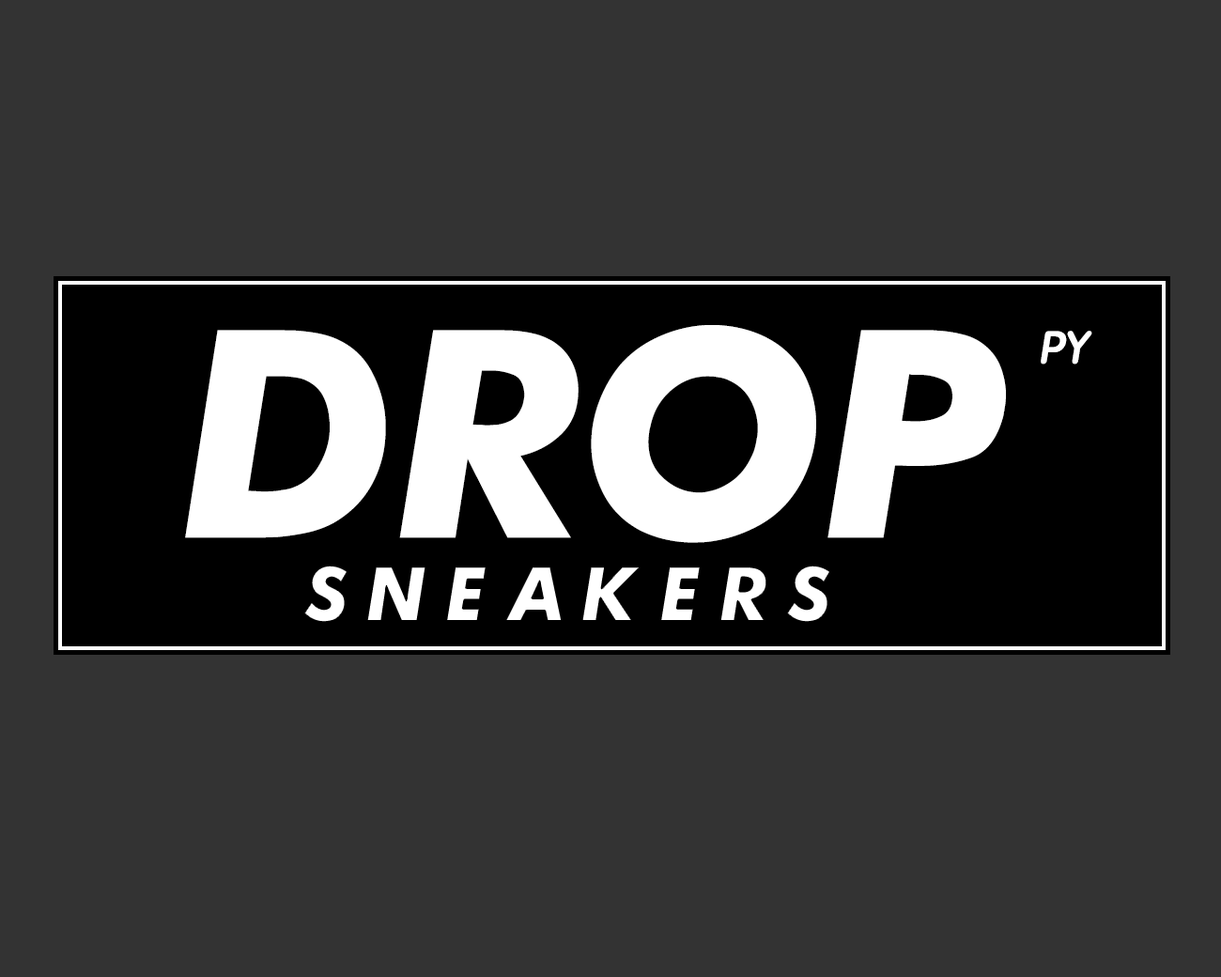
<style>
.page{position:relative;width:1221px;height:977px;background:#333333}
.page>*{position:absolute;margin:0}
.t1{font:323.2px "Futura-Bold-Italic";color:#ffffff}
.t2{font:44px "AFuturaRoundDemiItalic";color:#ffffff;text-transform:uppercase}
.t3{font:84.2px "Futura-Bold-Italic";letter-spacing:0.2em;color:#ffffff;text-transform:uppercase}
</style>
<div class="page">
<p class="t1" style="left:185px;top:325px;width:821px;height:218px">DROP</p>
<p class="t2" style="left:1041px;top:331px;width:51px;height:33px">py</p>
<p class="t3" style="left:303px;top:564px;width:527px;height:59px">sneakers</p>
</div>
